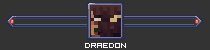
<style>
.page{position:relative;width:210px;height:50px;background:#333333}
.page>*{position:absolute;margin:0}
.t1{font:8px "5x5-Pixel";color:#ffffff}
</style>
<div class="page">
<p class="t1" style="left:85px;top:43px;width:41px;height:5px">draedon</p>
</div>
